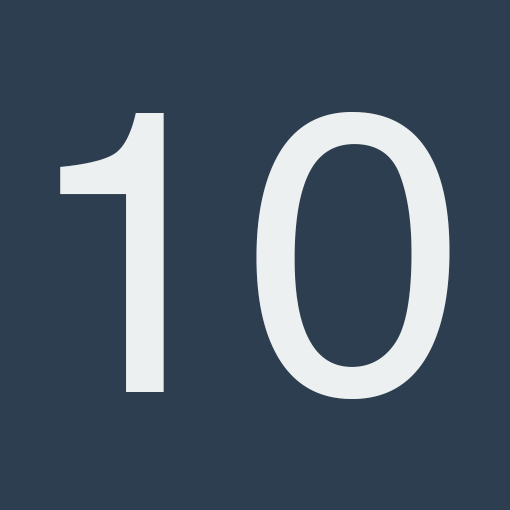
<style>
.page{position:relative;width:510px;height:510px;background:#2c3e50}
.page>*{position:absolute;margin:0}
.t1{font:400px "Helvetica";color:#ecf0f1}
</style>
<div class="page">
<p class="t1" style="left:60px;top:112px;width:390px;height:287px">10</p>
</div>
